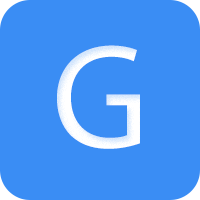
<style>
.page{position:relative;width:200px;height:200px;background:#3a8df4}
.page>*{position:absolute;margin:0}
.t1{font:150px "MyriadPro-Regular";color:#ffffff}
</style>
<div class="page">
<p class="t1" style="left:57px;top:45px;width:83px;height:104px">G</p>
</div>
